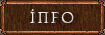
<style>
.page{position:relative;width:105px;height:35px}
.page>*{position:absolute;margin:0}
.t1{font:18px "Mason-Regular";letter-spacing:0.1em;color:#eae5e5;scale:0.87 1}
</style>
<div class="page">
<p class="t1" style="left:30px;top:9px;width:44px;height:14px">INFO</p>
</div>
